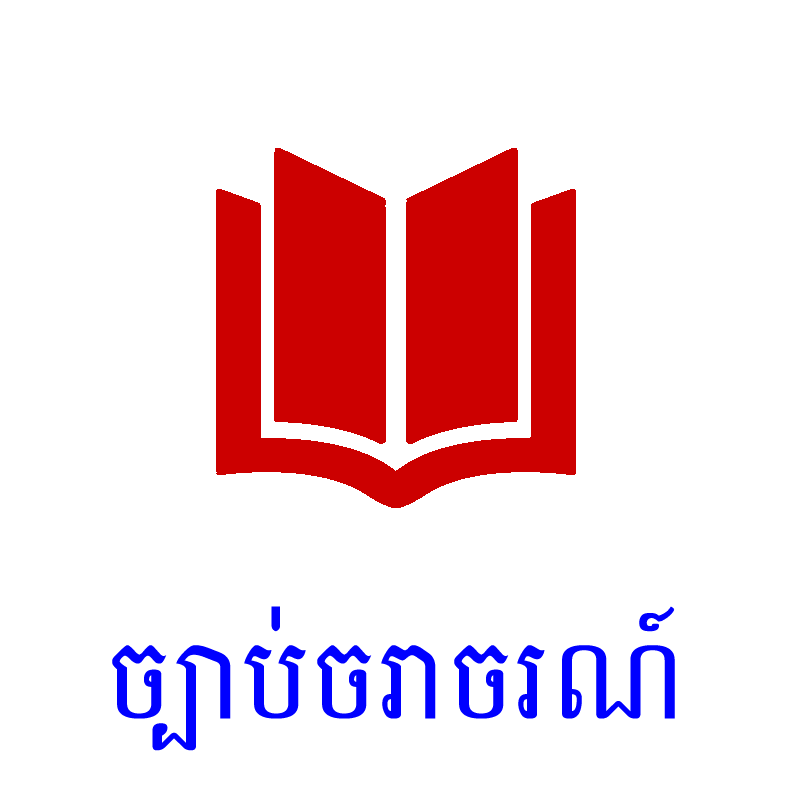
<style>
.page{position:relative;width:790px;height:790px;background:#ffffff}
.page>*{position:absolute;margin:0}
.t1{font:100px "Kh-Battambang";color:#0000ff}
</style>
<div class="page">
<p class="t1" style="left:112px;top:606px;width:563px;height:145px">ច្បាប់ចរាចរណ៍</p>
</div>
